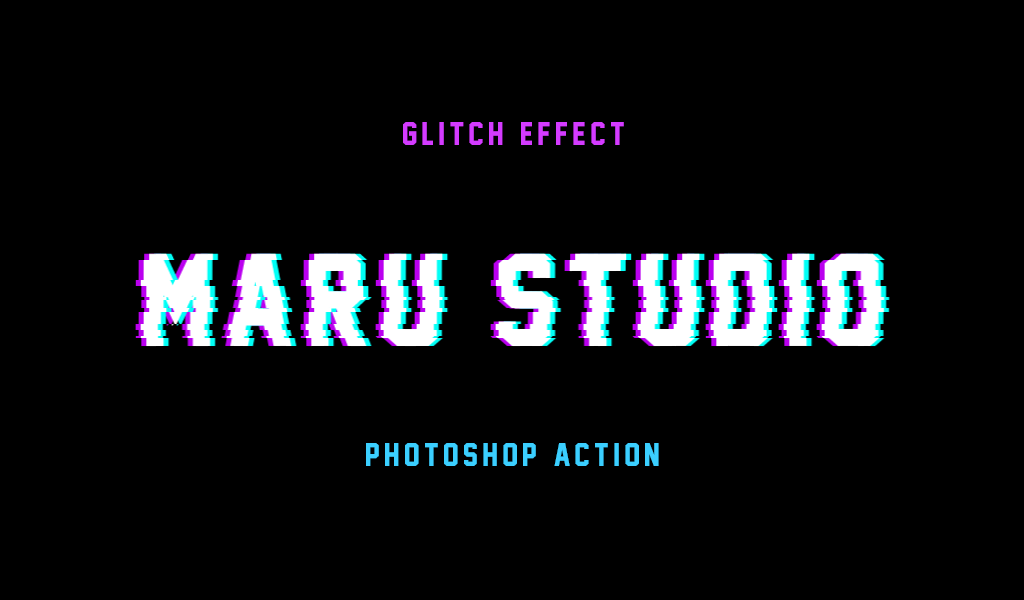
<style>
.page{position:relative;width:1024px;height:600px;background:#000000}
.page>*{position:absolute;margin:0}
.t1{font:30px "JerseyM54";letter-spacing:0.15em;color:#d43bff}
.t2{font:30px "JerseyM54";letter-spacing:0.15em;color:#3bcfff}
</style>
<div class="page">
<p class="t1" style="left:403px;top:122px;width:221px;height:23px">GLITCH EFFECT</p>
<p class="t2" style="left:366px;top:443px;width:293px;height:23px">PHOTOSHOP ACTION</p>
</div>
